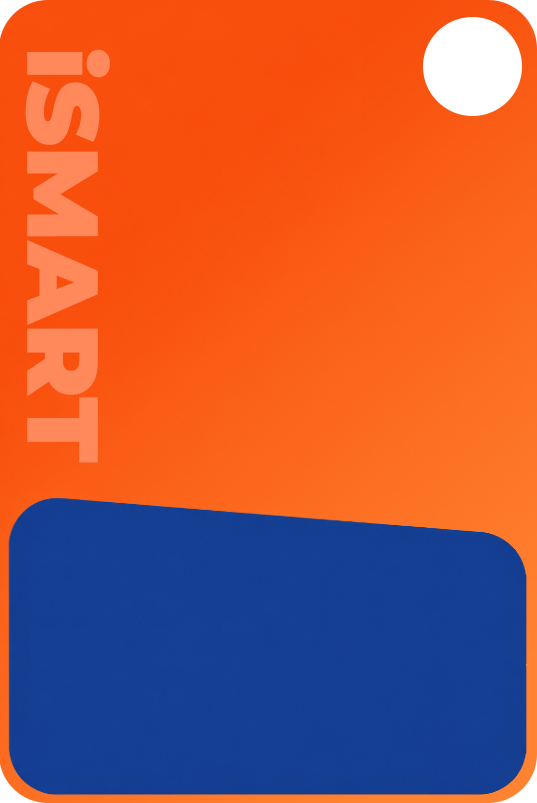
<style>
.page{position:relative;width:537px;height:803px}
.page>*{position:absolute;margin:0}
.t1{font:100.6px "Montserrat-Black";color:#ff895b}
</style>
<div class="page">
<p class="t1" style="left:25px;top:49px;width:85px;height:414px;rotate:90deg">iSMART</p>
</div>
